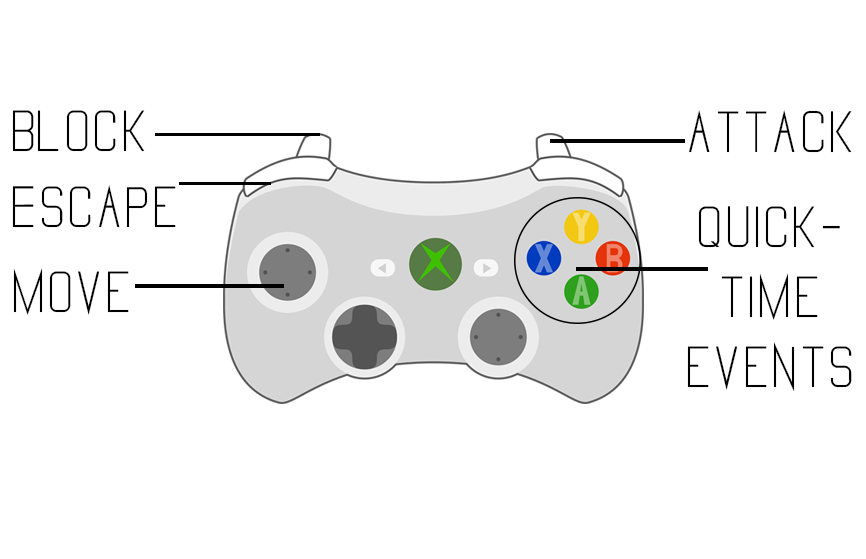
<style>
.page{position:relative;width:866px;height:559px;background:#ffffff}
.page>*{position:absolute;margin:0}
.t1{font:58.3px "Vanadine-Bold";color:#000000}
</style>
<div class="page">
<p class="t1" style="left:12px;top:110px;width:133px;height:42px">Block</p>
<p class="t1" style="left:689px;top:110px;width:163px;height:43px">AtTACK</p>
<p class="t1" style="left:12px;top:185px;width:164px;height:43px">EscApe</p>
<p class="t1" style="left:687px;top:206px;width:165px;height:186px;text-align:center">Quick-<br>time<br>events</p>
<p class="t1" style="left:13px;top:268px;width:116px;height:47px">Move</p>
</div>
